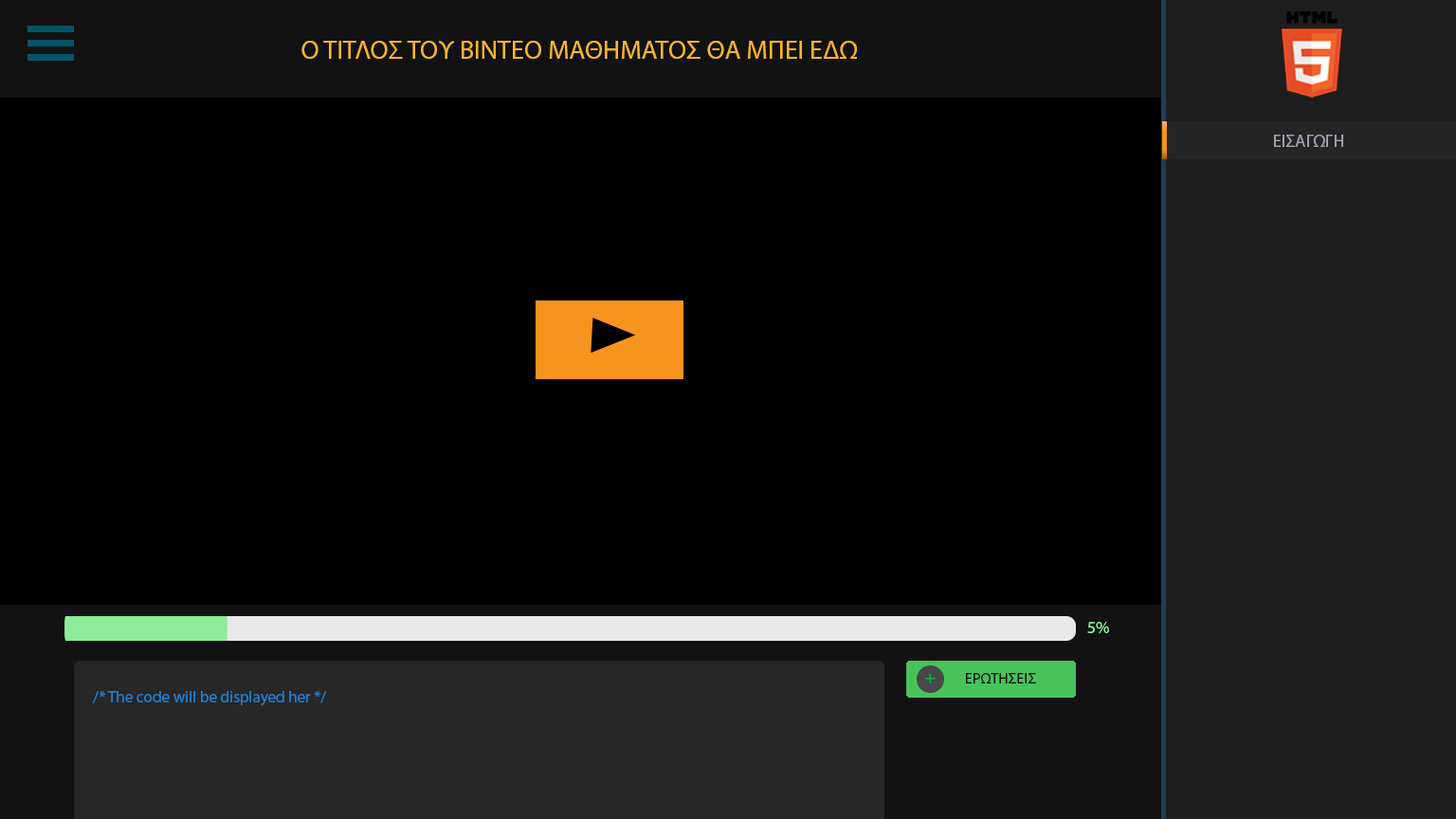
<style>
.page{position:relative;width:1456px;height:819px;background:#000000}
.page>*{position:absolute;margin:0}
.t1{font:26.5px "MyriadPro-Regular";color:#ffb530}
.t2{font:17.5px "MyriadPro-Regular";color:#a2a4b4}
.t3{font:17.1px "MyriadPro-Regular";color:#8ded9b}
.t4{font:15.2px "MyriadPro-Regular";color:#121212}
.t5{font:16.1px "MyriadPro-Regular";color:#237dca}
</style>
<div class="page">
<p class="t1" style="left:301px;top:41px;width:556px;height:18px">Ο ΤΙΤΛΟΣ ΤΟΥ ΒΙΝΤΕΟ ΜΑΘΗΜΑΤΟΣ ΘΑ ΜΠΕΙ ΕΔΩ</p>
<p class="t2" style="left:1274px;top:135px;width:69px;height:12px">ΕΙΣΑΓΩΓΗ</p>
<p class="t3" style="left:1087px;top:622px;width:22px;height:12px">5%</p>
<p class="t4" style="left:966px;top:673px;width:70px;height:10px">ΕΡΩΤΗΣΕΙΣ</p>
<p class="t5" style="left:93px;top:691px;width:233px;height:15px">/* The code will be displayed her */</p>
</div>
